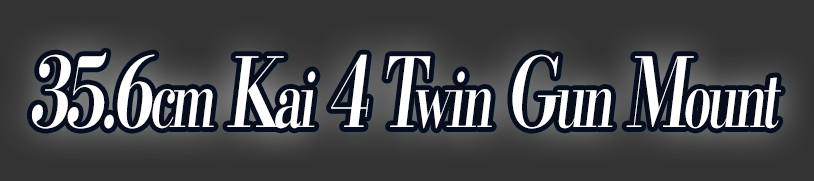
<style>
.page{position:relative;width:814px;height:181px;background:#333333}
.page>*{position:absolute;margin:0}
.t1{font:96px "KochoStd-Heavy";letter-spacing:-0.08em;color:#ffffff;font-style:italic;scale:0.68 1}
.t2{font:76.8px "KochoStd-Heavy";letter-spacing:-0.08em;color:#ffffff;font-style:italic;scale:0.68 1}
</style>
<div class="page">
<p class="t1" style="left:31px;top:52px;width:750px;height:77px">35.6<span class="t2">cm</span> K<span class="t2">ai</span> 4 T<span class="t2">win</span> G<span class="t2">un</span> M<span class="t2">ount</span></p>
</div>
